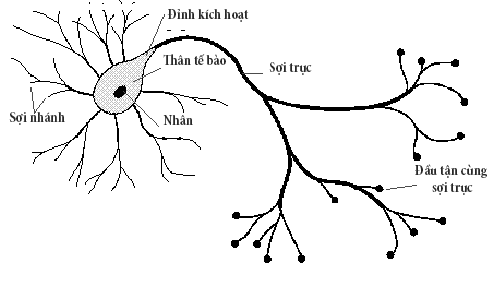
<style>
.page{position:relative;width:497px;height:287px;background:#ffffff}
.page>*{position:absolute;margin:0}
.t1{font:14px "MinionPro-BoldCn";color:#282828}
</style>
<div class="page">
<p class="t1" style="left:167px;top:9px;width:82px;height:13px">Đỉnh kích hoạt</p>
<p class="t1" style="left:163px;top:54px;width:63px;height:11px">Thân tế bào</p>
<p class="t1" style="left:269px;top:62px;width:43px;height:13px">Sợi trục</p>
<p class="t1" style="left:9px;top:112px;width:56px;height:13px">Sợi nhánh</p>
<p class="t1" style="left:163px;top:115px;width:30px;height:10px">Nhân</p>
<p class="t1" style="left:415px;top:164px;width:72px;height:31px;text-align:center">Đầu tận cùng<br> sợi trục</p>
</div>
